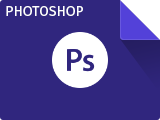
<style>
.page{position:relative;width:160px;height:120px;background:#30267e}
.page>*{position:absolute;margin:0}
.t1{font:14px "FiraSans-Regular";color:#ffffff}
</style>
<div class="page">
<p class="t1" style="left:6px;top:6px;width:77px;height:10px">PHOTOSHOP</p>
</div>
